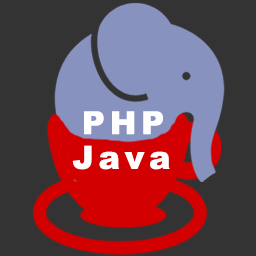
<style>
.page{position:relative;width:256px;height:256px;background:#333333}
.page>*{position:absolute;margin:0}
.t1{font:32px "Arial-Black";letter-spacing:0.15em;color:#ffffff}
</style>
<div class="page">
<p class="t1" style="left:84px;top:111px;width:79px;height:24px">PHP</p>
<p class="t1" style="left:72px;top:145px;width:98px;height:25px">Java</p>
</div>
